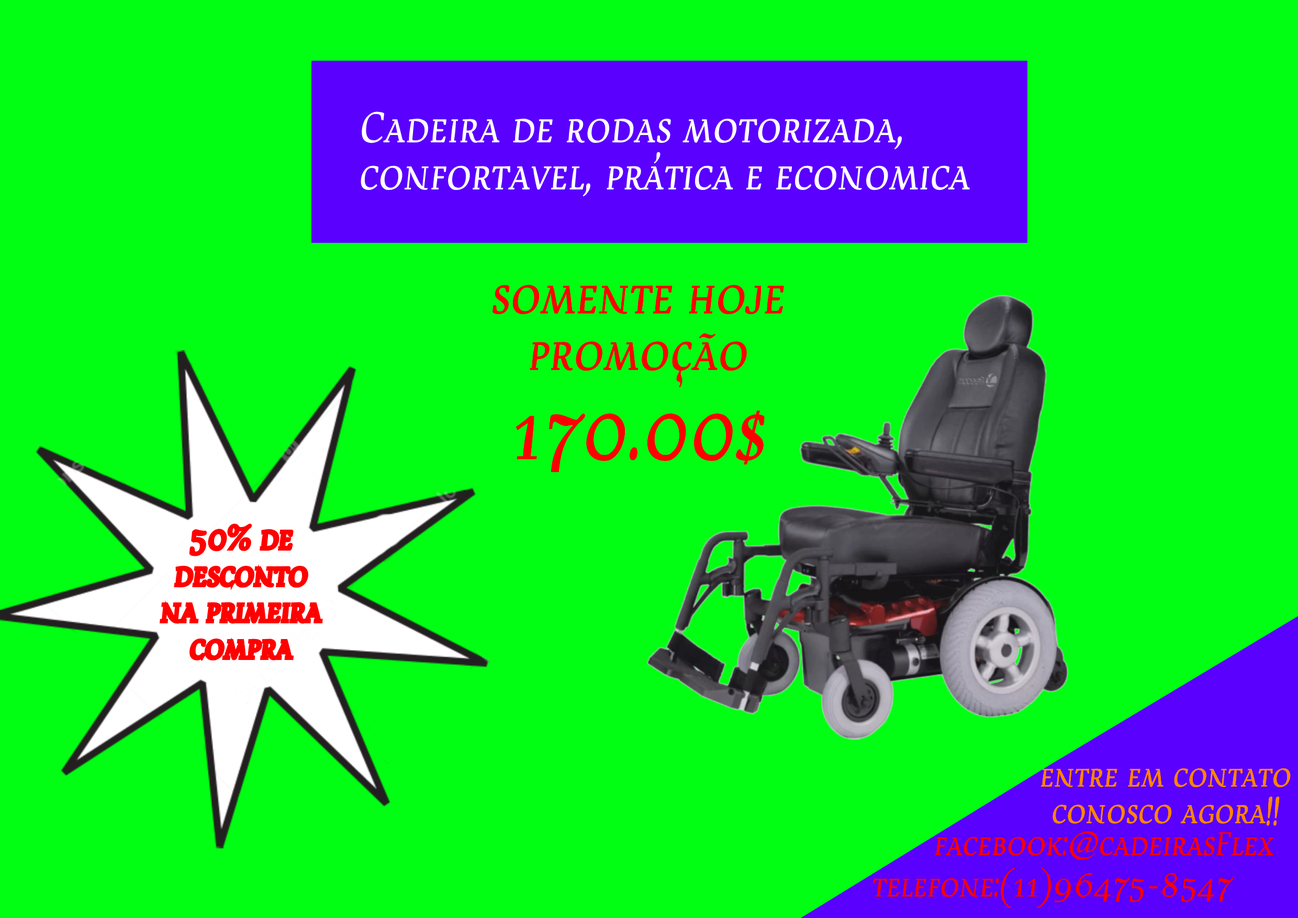
<style>
.page{position:relative;width:1298px;height:918px;background:#00ff12}
.page>*{position:absolute;margin:0}
.t1{font:39.3px "DevroyeSCOSF";color:#ffffff}
.t2{font:47.1px "DevroyeSCOSF";color:#ff0000}
.t3{font:74.3px "DevroyeSCOSF";color:#ff0000}
.t4{font:30.4px "DevroyeSCOSF";color:#ff0000}
.t5{font:30.4px "DevroyeSCOSF";color:#ff8400}
</style>
<div class="page">
<p class="t1" style="left:361px;top:112px;width:609px;height:85px">Cadeira de rodas motorizada, confortavel, prática e economica</p>
<p class="t2" style="left:493px;top:285px;width:291px;height:187px;text-align:center">somente hoje promoção<br><span class="t3">170.00$</span></p>
<p class="t4" style="left:160px;top:524px;width:163px;height:137px;text-align:center">50% de desconto na primeira compra</p>
<p class="t5" style="left:1041px;top:769px;width:250px;height:57px;text-align:center">entre em contato conosco agora!!</p>
<p class="t4" style="left:935px;top:831px;width:339px;height:29px">facebook:@cadeirasFlex</p>
<p class="t4" style="left:873px;top:868px;width:361px;height:41px">telefone:(11)96475-8547</p>
</div>
